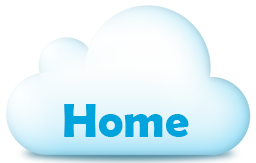
<style>
.page{position:relative;width:256px;height:163px;background:#ffffff}
.page>*{position:absolute;margin:0}
.t1{font:48px "BerlinSansFBDemi-Bold";color:#00a4dd}
</style>
<div class="page">
<p class="t1" style="left:64px;top:104px;width:125px;height:33px">Home</p>
</div>
